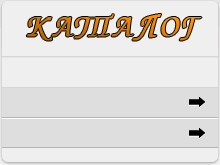
<style>
.page{position:relative;width:220px;height:165px;background:#efefef}
.page>*{position:absolute;margin:0}
.t1{font:24px "ZapfChancer";letter-spacing:-0.025em;font-weight:bold}
.t2{font:24px "ZapfChancer";letter-spacing:-0.1em;font-weight:bold}
</style>
<div class="page">
<p class="t1" style="left:26px;top:14px;width:176px;height:27px">КА<span class="t2">Т</span>АЛОГ</p>
</div>
